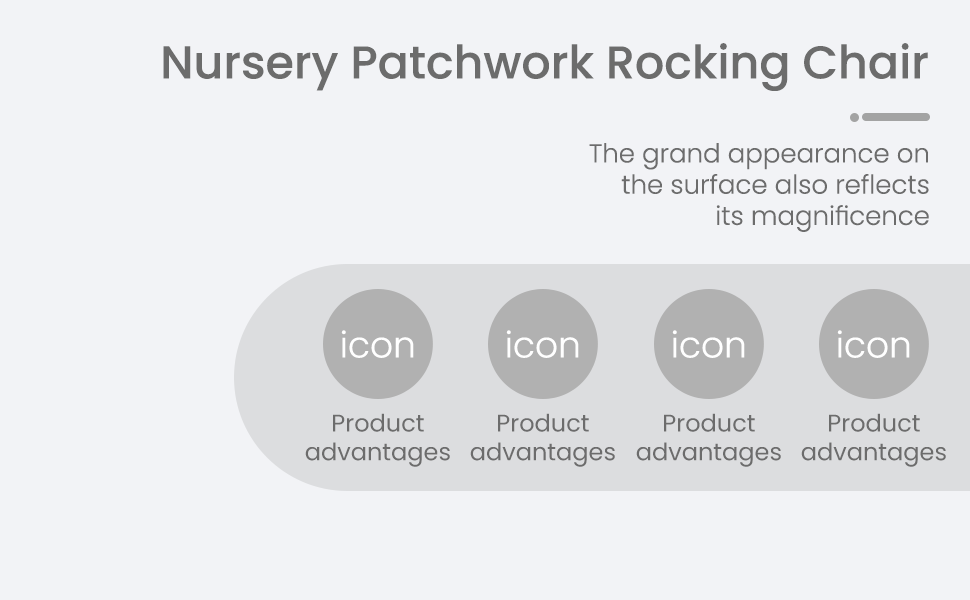
<style>
.page{position:relative;width:970px;height:600px;background:#f2f3f6}
.page>*{position:absolute;margin:0}
.t1{font:46px "Poppins-Medium";color:#6c6c6c}
.t2{font:26px "Poppins-Light";color:#6c6c6c}
.t3{font:36px "Poppins-Light";color:#ffffff}
.t4{font:24px "Poppins-Regular";color:#6c6c6c}
</style>
<div class="page">
<p class="t1" style="left:163px;top:43px;width:765px;height:48px">Nursery Patchwork Rocking Chair</p>
<p class="t2" style="left:589px;top:143px;width:340px;height:89px;text-align:right">The grand appearance on<br> the surface also reflects<br>its magnificence</p>
<p class="t3" style="left:341px;top:330px;width:73px;height:28px">icon</p>
<p class="t3" style="left:506px;top:330px;width:73px;height:28px">icon</p>
<p class="t3" style="left:672px;top:330px;width:73px;height:28px">icon</p>
<p class="t3" style="left:837px;top:330px;width:73px;height:28px">icon</p>
<p class="t4" style="left:305px;top:413px;width:145px;height:54px;text-align:center">Product<br>advantages</p>
<p class="t4" style="left:470px;top:413px;width:145px;height:54px;text-align:center">Product<br>advantages</p>
<p class="t4" style="left:636px;top:413px;width:145px;height:54px;text-align:center">Product<br>advantages</p>
<p class="t4" style="left:801px;top:413px;width:145px;height:54px;text-align:center">Product<br>advantages</p>
</div>
